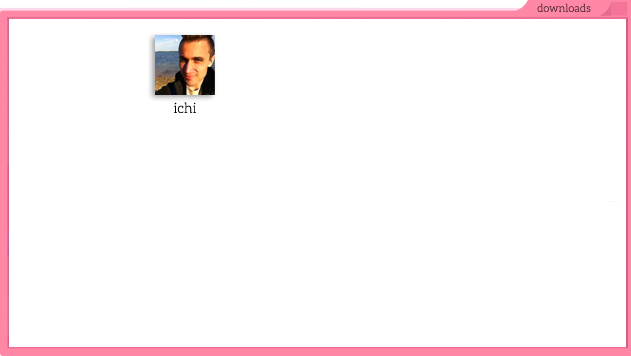
<style>
.page{position:relative;width:631px;height:356px;background:#ffffff}
.page>*{position:absolute;margin:0}
.t1{font:11px "Aleo-Light";color:#552d37}
.t2{font:14px "Aleo-Light";color:#000000}
</style>
<div class="page">
<p class="t1" style="left:537px;top:3px;width:54px;height:9px">downloads</p>
<p class="t2" style="left:174px;top:102px;width:22px;height:11px">ichi</p>
</div>
